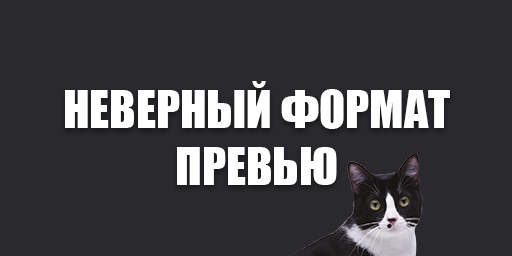
<style>
.page{position:relative;width:512px;height:256px;background:#2a292e}
.page>*{position:absolute;margin:0}
.t1{font:48px "Impact";color:#ffffff}
</style>
<div class="page">
<p class="t1" style="left:65px;top:81px;width:385px;height:104px;text-align:center">НЕВЕРНЫЙ ФОРМАТ<br>ПРЕВЬЮ</p>
</div>
